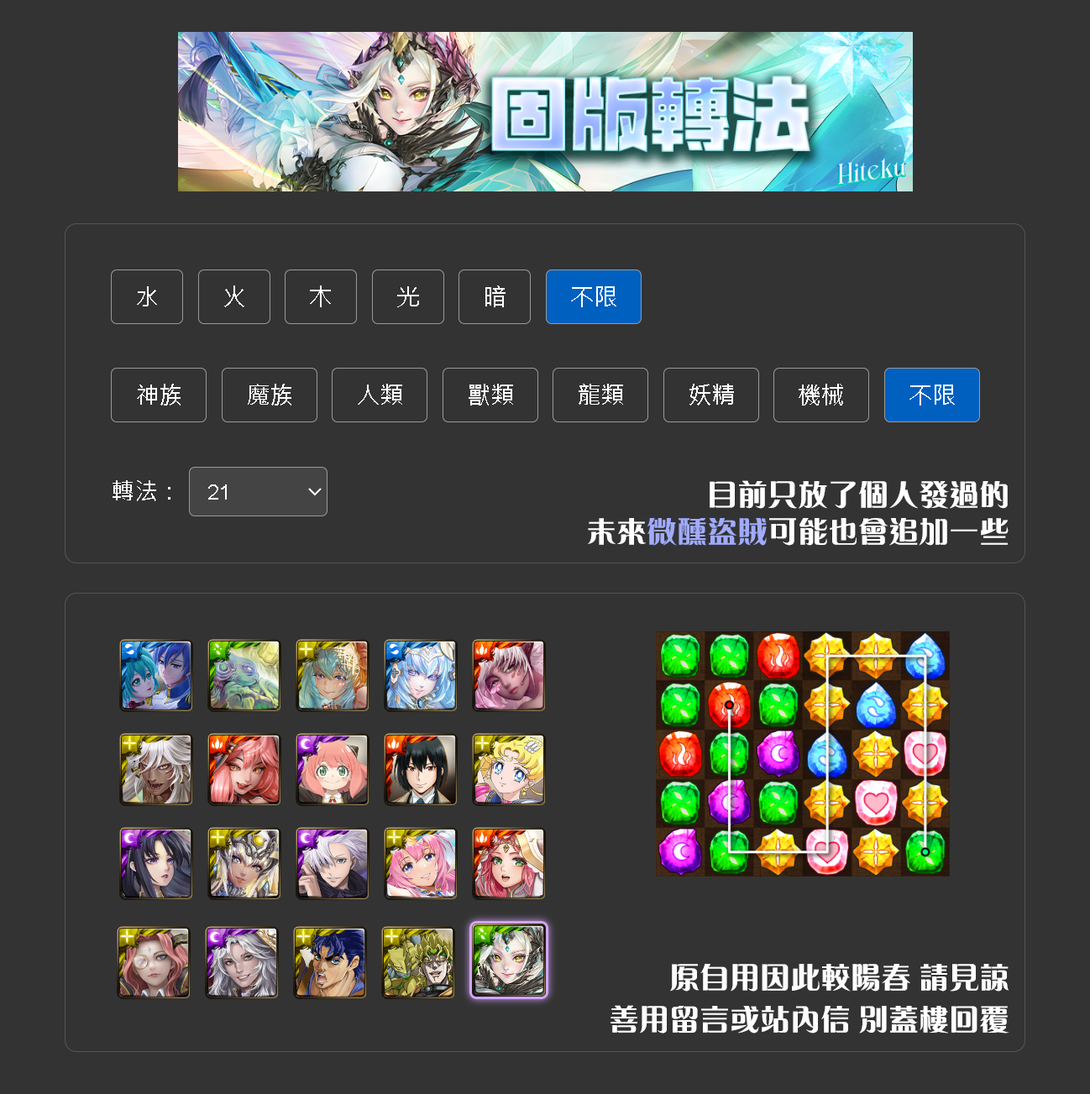
<style>
.page{position:relative;width:1090px;height:1094px;background:#333333}
.page>*{position:absolute;margin:0}
.t1{font:30.2px "MEllanHK-Xbold";color:#ffffff}
.t2{font:30.2px "MEllanHK-Xbold";color:#a0abfd}
</style>
<div class="page">
<p class="t1" style="left:710px;top:480px;width:298px;height:29px">目前只放了個人發過的</p>
<p class="t1" style="left:588px;top:518px;width:420px;height:28px">未來<span class="t2">微醺盜賊</span>可能也會追加一些</p>
<p class="t1" style="left:670px;top:964px;width:339px;height:28px">原自用因此較陽春 請見諒</p>
<p class="t1" style="left:610px;top:1005px;width:399px;height:29px">善用留言或站內信 別蓋樓回覆</p>
</div>
